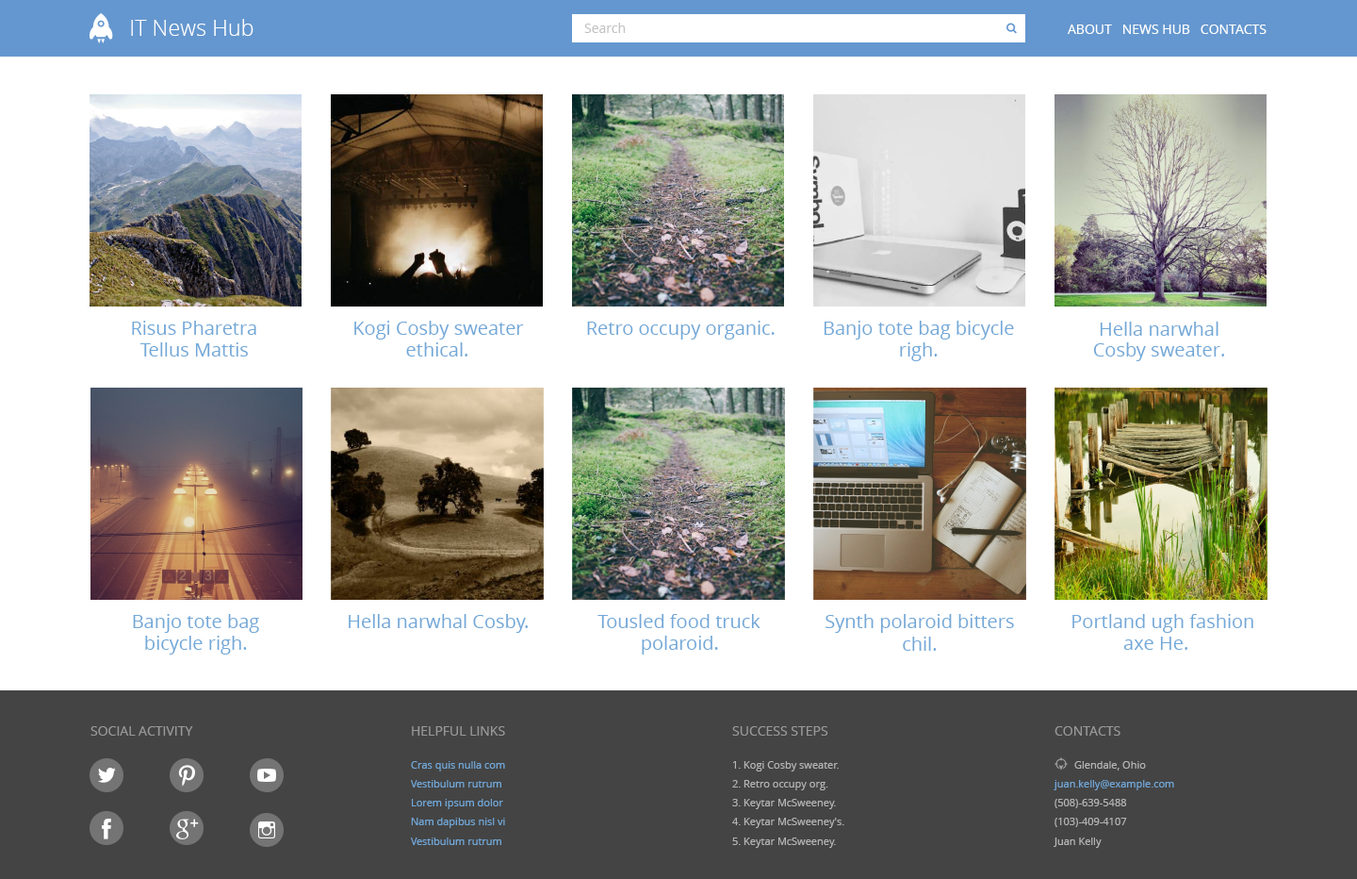
<style>
.page{position:relative;width:1357px;height:879px;background:#ffffff}
.page>*{position:absolute;margin:0}
.t1{font:22.1px "OpenSans-Light";color:#ffffff}
.t2{font:13.2px "OpenSans";color:#c3c3c3}
.t3{font:13.2px "OpenSans";letter-spacing:-0.017em;color:#c3c3c3}
.t4{font:13.2px "OpenSans";color:#ffffff}
.t5{font:13.2px "OpenSans";letter-spacing:-0.067em;color:#ffffff}
.t6{font:18.9px "OpenSans";color:#72a8d8}
.t7{font:18.9px "OpenSans";letter-spacing:-0.017em;color:#72a8d8}
.t8{font:18.9px/21.7px "OpenSans";color:#72a8d8}
.t9{font:18.9px "OpenSans";letter-spacing:-0.111em;color:#72a8d8}
.t10{font:18.9px "OpenSans";letter-spacing:-0.019em;color:#72a8d8}
.t11{font:18.9px "OpenSans";letter-spacing:-0.091em;color:#72a8d8}
.t12{font:18.9px "OpenSans";letter-spacing:-0.11em;color:#72a8d8}
.t13{font:13.2px "OpenSans";color:#989898}
.t14{font:13.2px "OpenSans";letter-spacing:-0.067em;color:#989898}
.t15{font:10.4px "OpenSans";color:#72a8d8}
.t16{font:10.4px "OpenSans";color:#b4b4b4}
.t17{font:10.4px "OpenSans";letter-spacing:-0.091em;color:#b4b4b4}
.t18{font:10.4px "OpenSans";letter-spacing:-0.054em;color:#72a8d8}
.t19{font:10.4px "OpenSans";letter-spacing:-0.017em;color:#b4b4b4}
.t20{font:10.4px "OpenSans";letter-spacing:-0.017em;color:#72a8d8}
.t21{font:10.4px "OpenSans";letter-spacing:-0.092em;color:#b4b4b4}
</style>
<div class="page">
<p class="t1" style="left:131px;top:19px;width:123px;height:17px">IT News Hub</p>
<p class="t2" style="left:584px;top:23px;width:42px;height:10px">Sea<span class="t3">r</span>ch</p>
<p class="t4" style="left:1068px;top:25px;width:199px;height:9px">ABOUT   NEWS HUB   CON<span class="t5">T</span>ACTS</p>
<p class="t6" style="left:132px;top:320px;width:124px;height:15px">Risus Pha<span class="t7">r</span>etra</p>
<p class="t6" style="left:354px;top:320px;width:170px;height:19px">Kogi Cosby sweater</p>
<p class="t6" style="left:587px;top:320px;width:188px;height:19px">Ret<span class="t7">r</span>o occupy organic.</p>
<p class="t8" style="left:824px;top:320px;width:190px;height:41px;text-align:center">Banjo tote bag bicycle<br>righ.</p>
<p class="t6" style="left:1100px;top:321px;width:119px;height:15px">Hella narwhal</p>
<p class="t6" style="left:140px;top:342px;width:108px;height:14px"><span class="t9">T</span>ellus Mattis</p>
<p class="t6" style="left:406px;top:342px;width:62px;height:14px">ethical.</p>
<p class="t6" style="left:1093px;top:342px;width:131px;height:19px">Cos<span class="t10">b</span>y sweater.</p>
<p class="t6" style="left:133px;top:614px;width:126px;height:18px">Banjo tote bag</p>
<p class="t6" style="left:349px;top:614px;width:179px;height:18px">Hella narwhal Cosb<span class="t11">y</span>.</p>
<p class="t6" style="left:598px;top:614px;width:163px;height:14px"><span class="t12">T</span>ousled food truck</p>
<p class="t6" style="left:826px;top:614px;width:188px;height:36px;text-align:center">Synth pola<span class="t7">r</span>oid bitters<br>chil.</p>
<p class="t6" style="left:1073px;top:614px;width:181px;height:18px">Portland ugh fashion</p>
<p class="t6" style="left:145px;top:635px;width:102px;height:19px">bicycle righ.</p>
<p class="t6" style="left:642px;top:635px;width:76px;height:19px">pola<span class="t7">r</span>oid.</p>
<p class="t6" style="left:1124px;top:636px;width:64px;height:13px">axe He.</p>
<p class="t13" style="left:90px;top:726px;width:103px;height:9px">SOCIAL ACTIVITY</p>
<p class="t13" style="left:412px;top:726px;width:93px;height:9px">HELPFUL LINKS</p>
<p class="t13" style="left:732px;top:726px;width:97px;height:9px">SUCCESS STEPS</p>
<p class="t13" style="left:1055px;top:726px;width:66px;height:9px">CON<span class="t14">T</span>ACTS</p>
<p class="t15" style="left:411px;top:761px;width:94px;height:10px">Cras quis nulla com</p>
<p class="t16" style="left:733px;top:761px;width:106px;height:10px">1. Kogi Cosby sweate<span class="t17">r</span>.</p>
<p class="t16" style="left:1075px;top:761px;width:71px;height:9px">Glendale, Ohio</p>
<p class="t15" style="left:411px;top:780px;width:90px;height:7px"><span class="t18">V</span>estibulum rutrum</p>
<p class="t16" style="left:732px;top:780px;width:97px;height:10px">2. Ret<span class="t19">r</span>o occupy org.</p>
<p class="t15" style="left:1054px;top:780px;width:120px;height:10px">juan.kelly@example.com</p>
<p class="t15" style="left:412px;top:798px;width:91px;height:11px">Lo<span class="t20">r</span>em ipsum dolor</p>
<p class="t16" style="left:732px;top:798px;width:104px;height:11px">3. Keytar McSweene<span class="t21">y</span>.</p>
<p class="t16" style="left:1055px;top:798px;width:72px;height:10px">(508)-639-5488</p>
<p class="t15" style="left:411px;top:817px;width:94px;height:11px">Nam dapibus nisl vi</p>
<p class="t16" style="left:732px;top:817px;width:113px;height:11px">4. Keytar McSweeney's.</p>
<p class="t16" style="left:1055px;top:817px;width:72px;height:10px">(103)-409-4107</p>
<p class="t15" style="left:411px;top:837px;width:90px;height:8px"><span class="t18">V</span>estibulum rutrum</p>
<p class="t16" style="left:732px;top:837px;width:104px;height:10px">5. Keytar McSweene<span class="t21">y</span>.</p>
<p class="t16" style="left:1054px;top:837px;width:48px;height:10px">Juan Kelly</p>
</div>
